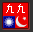
<style>
.page{position:relative;width:33px;height:32px;background:#f20000}
.page>*{position:absolute;margin:0}
.t1{font:10.4px "SimSun";color:#ffffff}
</style>
<div class="page">
<p class="t1" style="left:6px;top:4px;width:19px;height:9px">九九</p>
</div>
